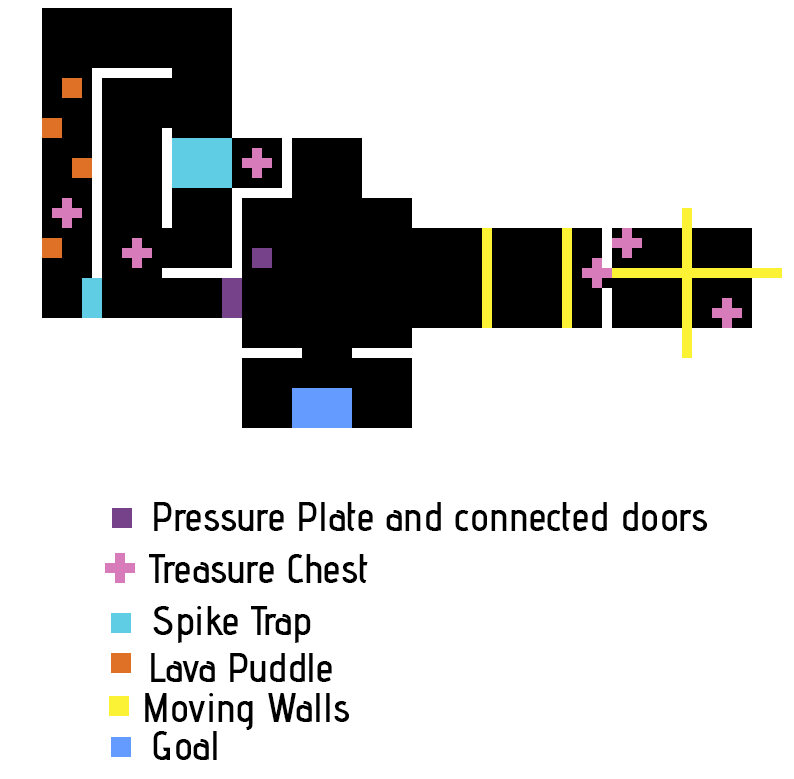
<style>
.page{position:relative;width:794px;height:779px;background:#ffffff}
.page>*{position:absolute;margin:0}
.t1{font:40px "AdventPro-SemiBold";color:#000000}
</style>
<div class="page">
<p class="t1" style="left:154px;top:502px;width:554px;height:29px">Pressure Plate and connected doors</p>
<p class="t1" style="left:149px;top:554px;width:219px;height:29px">Treasure Chest</p>
<p class="t1" style="left:153px;top:606px;width:158px;height:37px">Spike Trap</p>
<p class="t1" style="left:151px;top:653px;width:181px;height:29px">Lava Puddle</p>
<p class="t1" style="left:145px;top:693px;width:205px;height:37px">Moving Walls</p>
<p class="t1" style="left:153px;top:731px;width:64px;height:29px">Goal</p>
</div>
